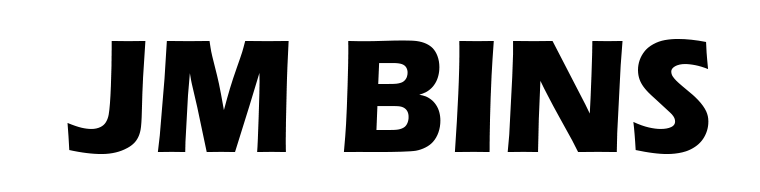
<style>
.page{position:relative;width:760px;height:192px;background:#ffffff}
.page>*{position:absolute;margin:0}
.t1{font:167.4px "ErasITC-Bold";color:#000000;scale:0.94 1}
</style>
<div class="page">
<p class="t1" style="left:67px;top:39px;width:642px;height:115px">JM BINS</p>
</div>
